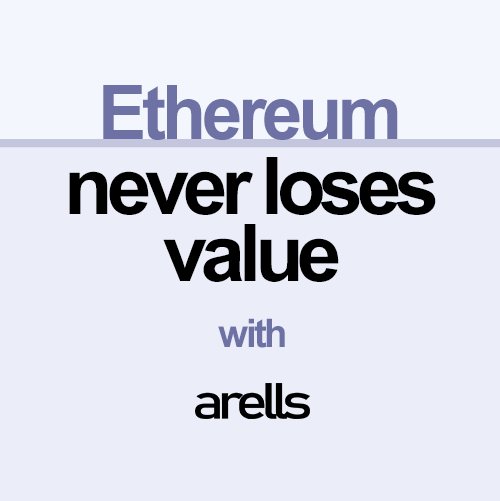
<style>
.page{position:relative;width:500px;height:501px;background:#ebedf8}
.page>*{position:absolute;margin:0}
.t1{font:75.2px "Arial-BoldMT";letter-spacing:-0.06em;color:#6d71a4;scale:0.96 1}
.t2{font:79.6px/66.3px "Arial-BoldMT";letter-spacing:-0.08em;color:#000000}
.t3{font:39.4px "Arial-BoldMT";letter-spacing:-0.06em;color:#6d71a4;scale:0.96 1}
</style>
<div class="page">
<p class="t1" style="left:103px;top:85px;width:295px;height:55px">Ethereum</p>
<p class="t2" style="left:69px;top:157px;width:367px;height:125px;text-align:center">never loses<br>value</p>
<p class="t3" style="left:218px;top:318px;width:67px;height:30px">with</p>
</div>
